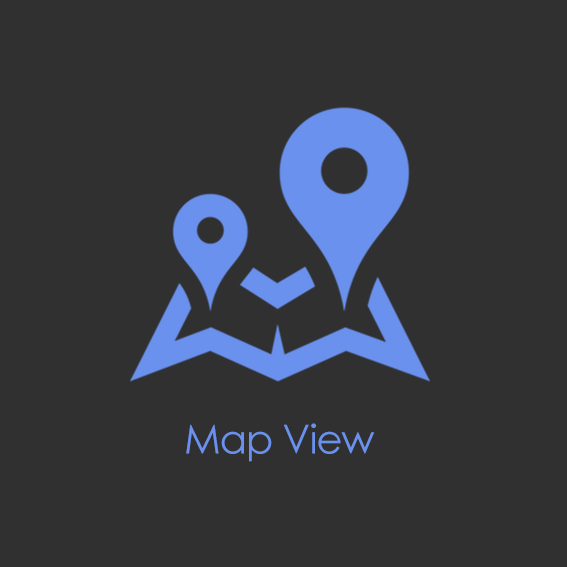
<style>
.page{position:relative;width:567px;height:567px;background:#303031}
.page>*{position:absolute;margin:0}
.t1{font:40px "CenturyGothic";letter-spacing:-0.025em;color:#6a91ed}
</style>
<div class="page">
<p class="t1" style="left:186px;top:423px;width:189px;height:39px">Map View</p>
</div>
